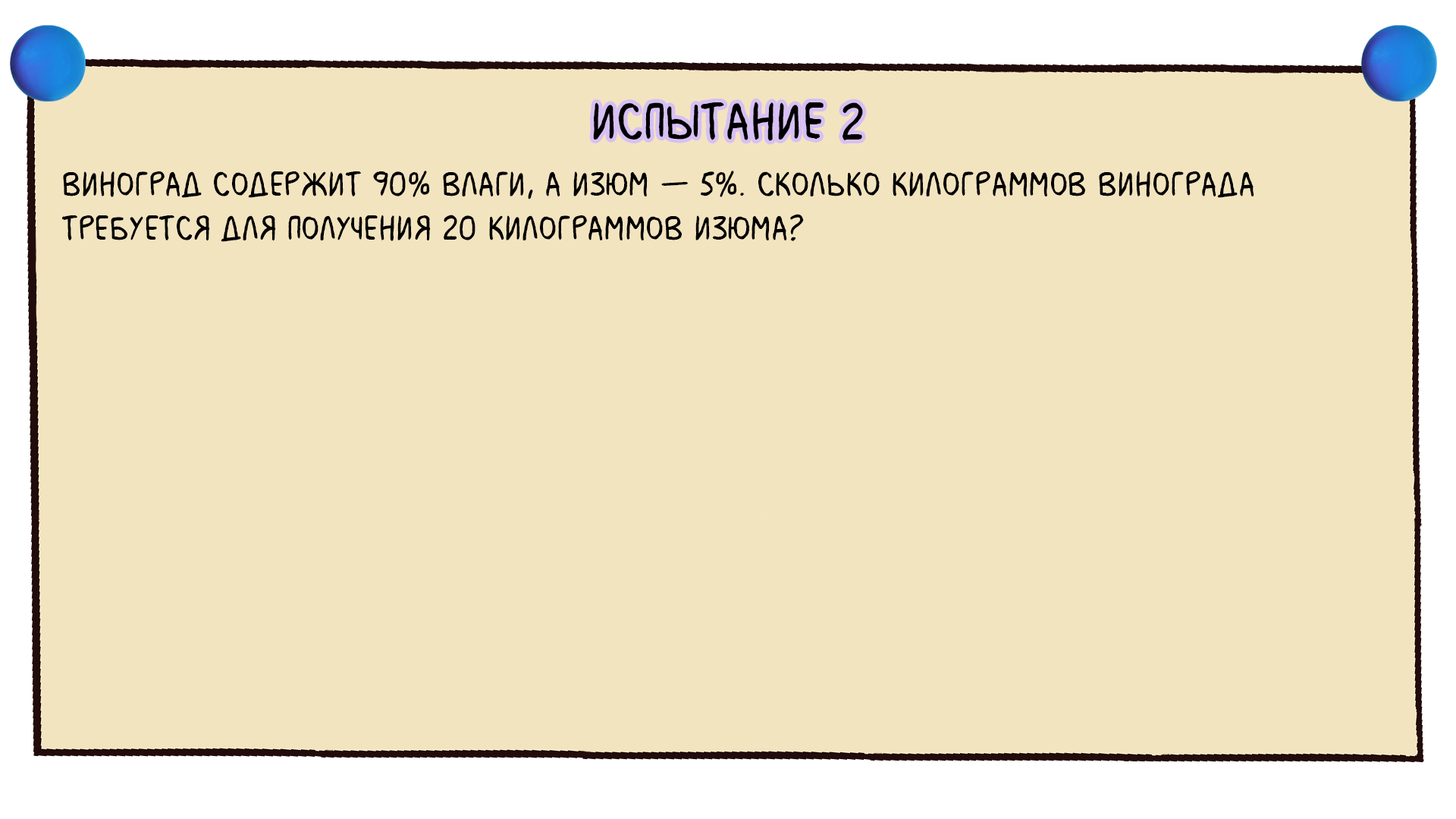
<style>
.page{position:relative;width:1456px;height:819px;background:#f3e4c0}
.page>*{position:absolute;margin:0}
.t1{font:54.6px "MilkMustacheBB";color:#000000}
.t2{font:36.4px "MilkMustacheBB";color:#000000}
</style>
<div class="page">
<p class="t1" style="left:593px;top:102px;width:270px;height:39px">испытание 2</p>
<p class="t2" style="left:61px;top:171px;width:1193px;height:71px">Виноград содержит 90% влаги, а изюм — 5%. Сколько килограммов винограда <br>требуется для получения 20 килограммов изюма?</p>
</div>
